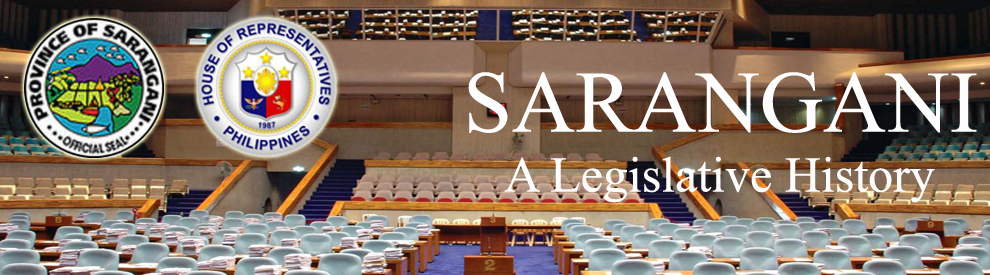
<style>
.page{position:relative;width:990px;height:275px}
.page>*{position:absolute;margin:0}
.t1{font:50px "TimesNewRomanPSMT";color:#fdfcfc}
.t2{font:87.5px "TimesNewRomanPSMT";color:#fdfdfd}
</style>
<div class="page">
<p class="t1" style="left:468px;top:72px;width:509px;height:131px;text-align:center"><span class="t2">SARANGANI<br></span>A Legislative History</p>
</div>
